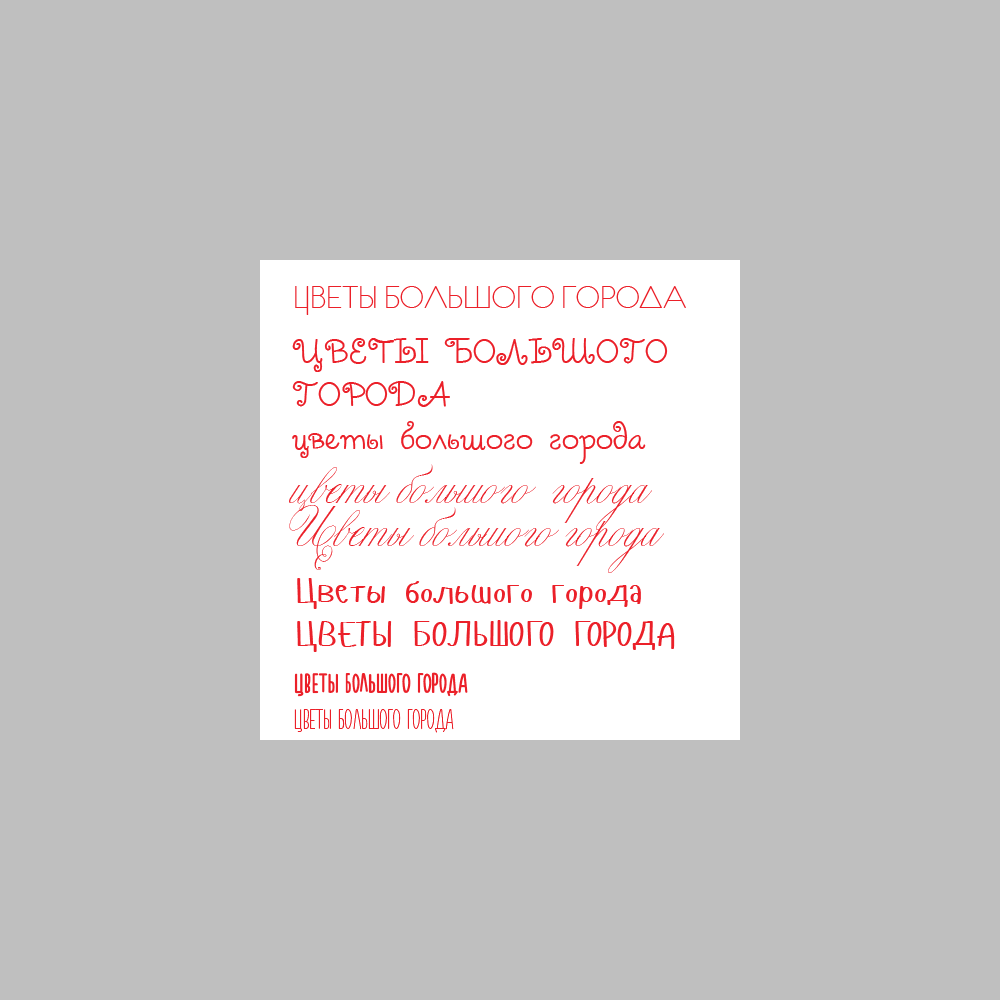
<style>
.page{position:relative;width:1000px;height:1000px;background:#bfbfbf}
.page>*{position:absolute;margin:0}
.t1{font:36px "Eurofurencelight";color:#eb2029}
.t2{font:36px "CoquetteC";color:#eb2029}
.t3{font:36px "ClassicaOne";color:#eb2029}
.t4{font:36px "Hangyaboly";color:#eb2029}
.t5{font:30px "NovitoNova-Regular";color:#eb2029}
.t6{font:30px "NovitoNova-Thin";color:#eb2029}
</style>
<div class="page">
<p class="t1" style="left:295px;top:286px;width:391px;height:29px">ЦВЕТЫ БОЛЬШОГО ГОРОДА</p>
<p class="t2" style="left:292px;top:338px;width:376px;height:126px">ЦВЕТЫ БОЛЬШОГО <br>ГОРОДА<br>цветы большого города</p>
<p class="t3" style="left:289px;top:464px;width:375px;height:109px">цветы большого  города<br>Цветы большого города</p>
<p class="t4" style="left:297px;top:578px;width:378px;height:74px">Цветы большого города<br>ЦВЕТЫ БОЛЬШОГО ГОРОДА</p>
<p class="t5" style="left:294px;top:672px;width:174px;height:61px">ЦВЕТЫ БОЛЬШОГО ГОРОДА<br><span class="t6">ЦВЕТЫ БОЛЬШОГО ГОРОДА</span></p>
</div>
